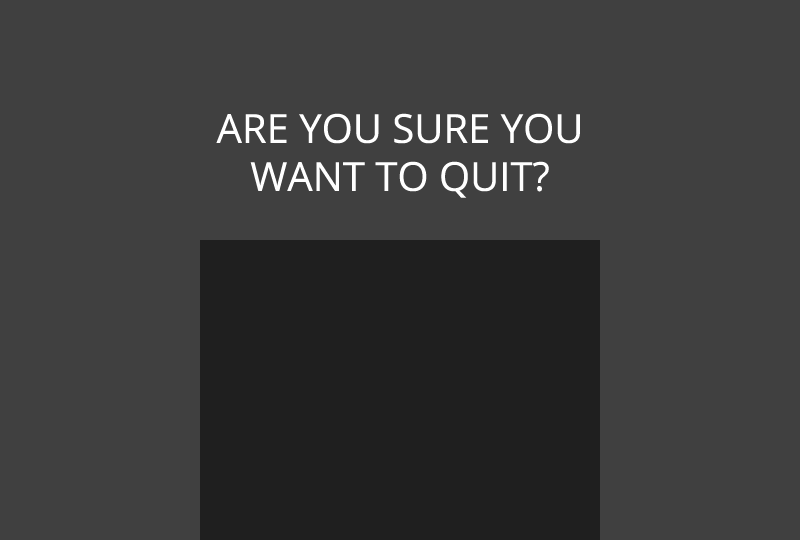
<style>
.page{position:relative;width:800px;height:540px;background:#404040}
.page>*{position:absolute;margin:0}
.t1{font:40px "OpenSans";color:#ffffff}
</style>
<div class="page">
<p class="t1" style="left:216px;top:113px;width:364px;height:85px;text-align:center">ARE YOU SURE YOU<br>WANT TO QUIT?</p>
</div>
